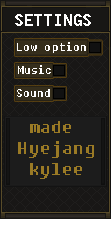
<style>
.page{position:relative;width:111px;height:231px;background:#181716}
.page>*{position:absolute;margin:0}
.t1{font:13px "DungGeunMo";letter-spacing:0.01em;color:#ffffff}
.t2{font:21px/21px "DungGeunMo";letter-spacing:0.01em;color:#9a7a25}
</style>
<div class="page">
<p class="t1" style="left:17px;top:42px;width:69px;height:11px">Low option</p>
<p class="t1" style="left:18px;top:65px;width:33px;height:9px">Music</p>
<p class="t1" style="left:17px;top:89px;width:33px;height:8px">Sound</p>
<p class="t2" style="left:18px;top:121px;width:76px;height:58px;text-align:center">made <br>Hyejang<br>kylee</p>
</div>
